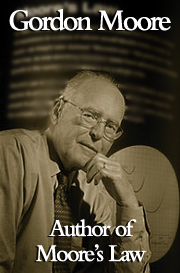
<style>
.page{position:relative;width:180px;height:273px}
.page>*{position:absolute;margin:0}
.t1{font:31.2px "BemboMT-SemiBold";letter-spacing:-0.08em;color:#ffffff;scale:0.95 1}
.t2{font:25px/25px "BemboMT-SemiBold";letter-spacing:-0.08em;color:#ffffff;scale:0.95 1}
</style>
<div class="page">
<p class="t1" style="left:9px;top:9px;width:162px;height:22px">Gordon Moore</p>
<p class="t2" style="left:36px;top:219px;width:110px;height:43px;text-align:center">Author of<br>Moore’s Law</p>
</div>
